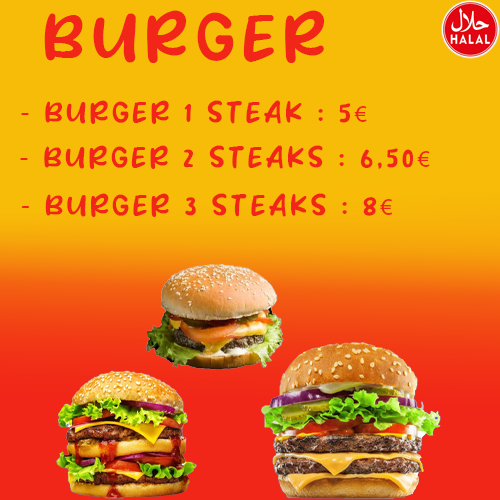
<style>
.page{position:relative;width:500px;height:500px;background:#f7bc08}
.page>*{position:absolute;margin:0}
.t1{font:54.4px "Waffle-Story";letter-spacing:0.14em;color:#f12618;text-transform:uppercase}
.t2{font:24px "Waffle-Story";letter-spacing:0.14em;color:#f12618;text-transform:uppercase}
.t3{font:24px "MyriadPro-Regular";letter-spacing:0.14em;color:#f12618;text-transform:uppercase}
</style>
<div class="page">
<p class="t1" style="left:44px;top:10px;width:281px;height:53px">Burger</p>
<p class="t2" style="left:21px;top:100px;width:346px;height:24px">- burger 1 steak : 5<span class="t3">€</span></p>
<p class="t2" style="left:20px;top:145px;width:410px;height:24px">- burger 2 steaks : 6,50<span class="t3">€</span></p>
<p class="t2" style="left:21px;top:193px;width:372px;height:24px">- burger 3 steaks : 8<span class="t3">€</span></p>
</div>
